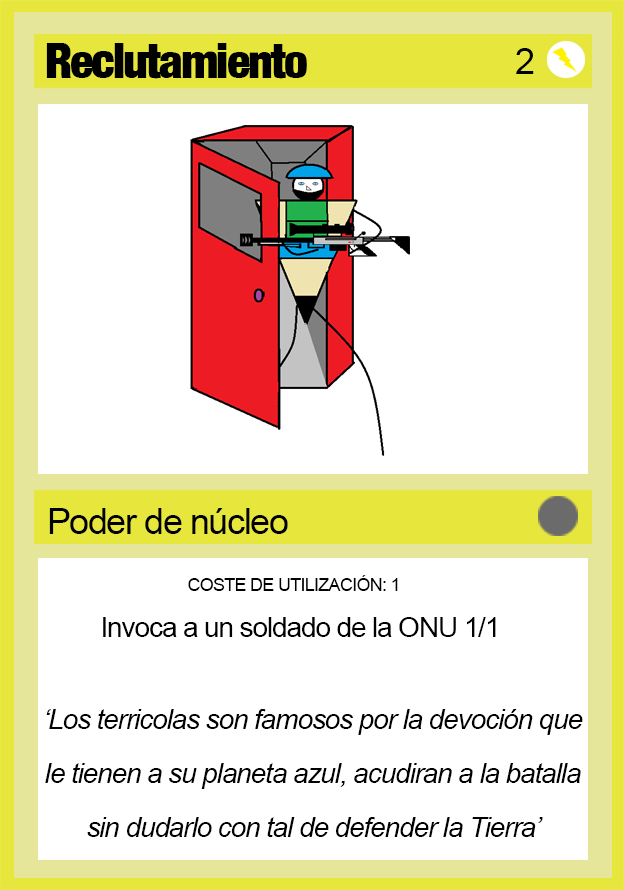
<style>
.page{position:relative;width:624px;height:890px;background:#ffffff}
.page>*{position:absolute;margin:0}
.t1{font:48px "Harvest";letter-spacing:-0.04em;color:#000000}
.t2{font:36px "ArialMT";letter-spacing:-0.04em;color:#000000}
.t3{font:18px "ArialMT";letter-spacing:-0.04em;color:#000000}
.t4{font:28px "ArialMT";letter-spacing:-0.04em;color:#000000}
.t5{font:28px/54px "Arial-ItalicMT";letter-spacing:-0.04em;color:#000000}
</style>
<div class="page">
<p class="t1" style="left:46px;top:43px;width:261px;height:36px">Reclutamiento</p>
<p class="t2" style="left:516px;top:48px;width:18px;height:26px">2</p>
<p class="t2" style="left:49px;top:508px;width:239px;height:26px">Poder de núcleo</p>
<p class="t3" style="left:188px;top:575px;width:210px;height:16px">COSTE DE UTILIZACIÓN: 1</p>
<p class="t4" style="left:103px;top:617px;width:393px;height:20px">Invoca a un soldado de la ONU 1/1</p>
<p class="t5" style="left:45px;top:709px;width:538px;height:128px;text-align:center">‘Los terricolas son famosos por la devoción que le tienen a su planeta azul, acudiran a la batalla sin dudarlo con tal de defender la Tierra’</p>
</div>
